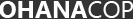
<style>
.page{position:relative;width:133px;height:19px;background:#333333}
.page>*{position:absolute;margin:0}
.t1{font:24px "MicrosoftTaiLe-Bold";color:#ffffff}
.t2{font:24px "MicrosoftTaiLe";color:#ffffff}
</style>
<div class="page">
<p class="t1" style="left:0px;top:1px;width:134px;height:17px">OHANA<span class="t2">COP</span></p>
</div>
